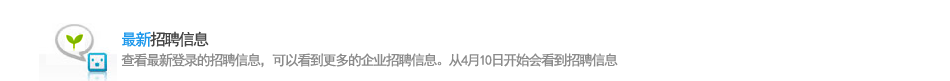
<style>
.page{position:relative;width:950px;height:81px;background:#ffffff}
.page>*{position:absolute;margin:0}
.t1{font:16px "SimHei";letter-spacing:-0.1em;color:#454545}
.t2{font:16px "SimHei";letter-spacing:-0.1em;color:#1b97eb}
.t3{font:14px "SimHei";letter-spacing:-0.1em;color:#8b8b8b}
</style>
<div class="page">
<p class="t1" style="left:122px;top:31px;width:87px;height:16px"><span class="t2">最新</span>招聘信息</p>
<p class="t3" style="left:121px;top:53px;width:497px;height:15px">查看最新登录的招聘信息，可以看到更多的企业招聘信息。从4月10日开始会看到招聘信息</p>
</div>
